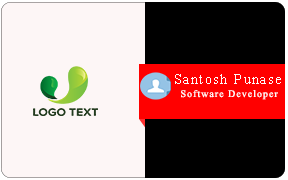
<style>
.page{position:relative;width:288px;height:180px;background:#fdf6f6}
.page>*{position:absolute;margin:0}
.t1{font:14px "TimesNewRomanPSMT";letter-spacing:0.1em;color:#fdf9f9}
.t2{font:10px "TimesNewRomanPSMT";letter-spacing:0.1em;color:#fdf9f9}
</style>
<div class="page">
<p class="t1" style="left:175px;top:74px;width:106px;height:10px">Santosh Punase</p>
<p class="t2" style="left:181px;top:90px;width:97px;height:10px">Software Developer</p>
</div>
